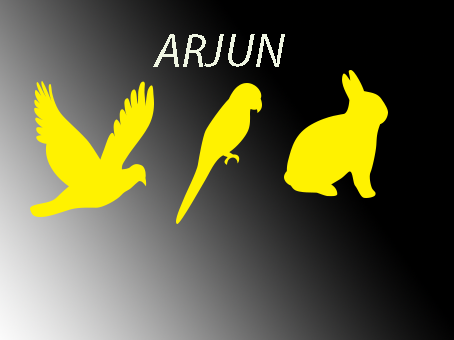
<style>
.page{position:relative;width:454px;height:340px;background:#000000}
.page>*{position:absolute;margin:0}
.t1{font:48px "MyriadHebrew-It";color:#f0f6e3}
</style>
<div class="page">
<p class="t1" style="left:153px;top:34px;width:132px;height:33px">ARJUN</p>
</div>
